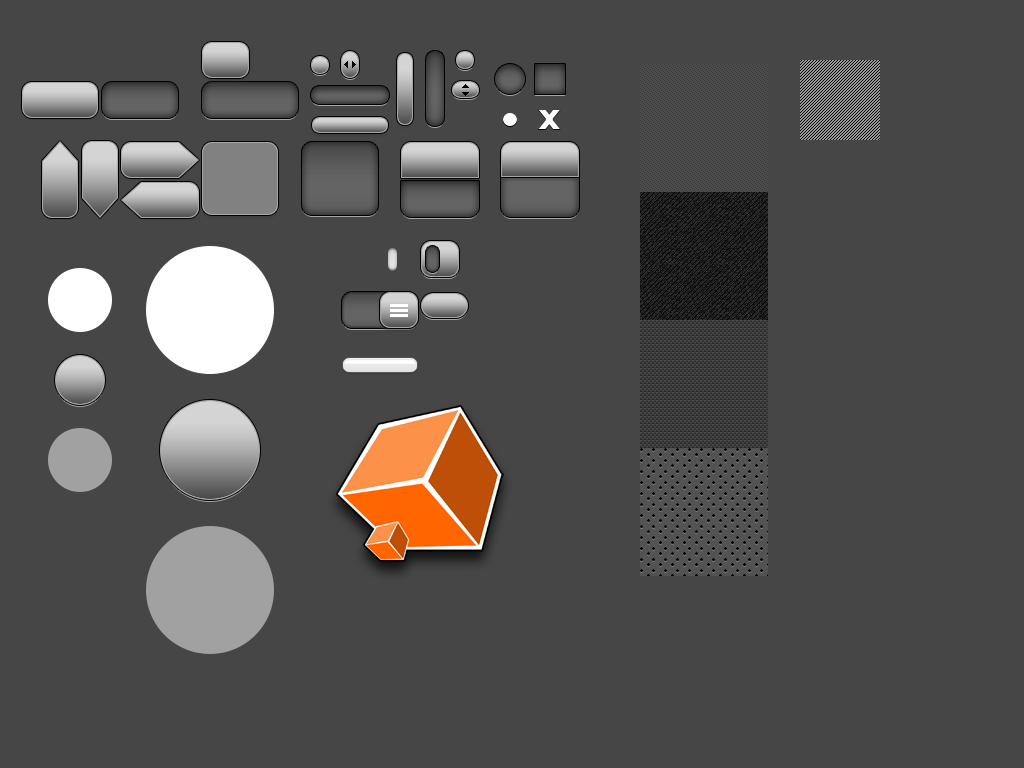
<style>
.page{position:relative;width:1024px;height:768px;background:#464646}
.page>*{position:absolute;margin:0}
.t1{font:28.7px "Robotica";color:#fefefe}
</style>
<div class="page">
<p class="t1" style="left:538px;top:110px;width:23px;height:20px">X</p>
</div>
